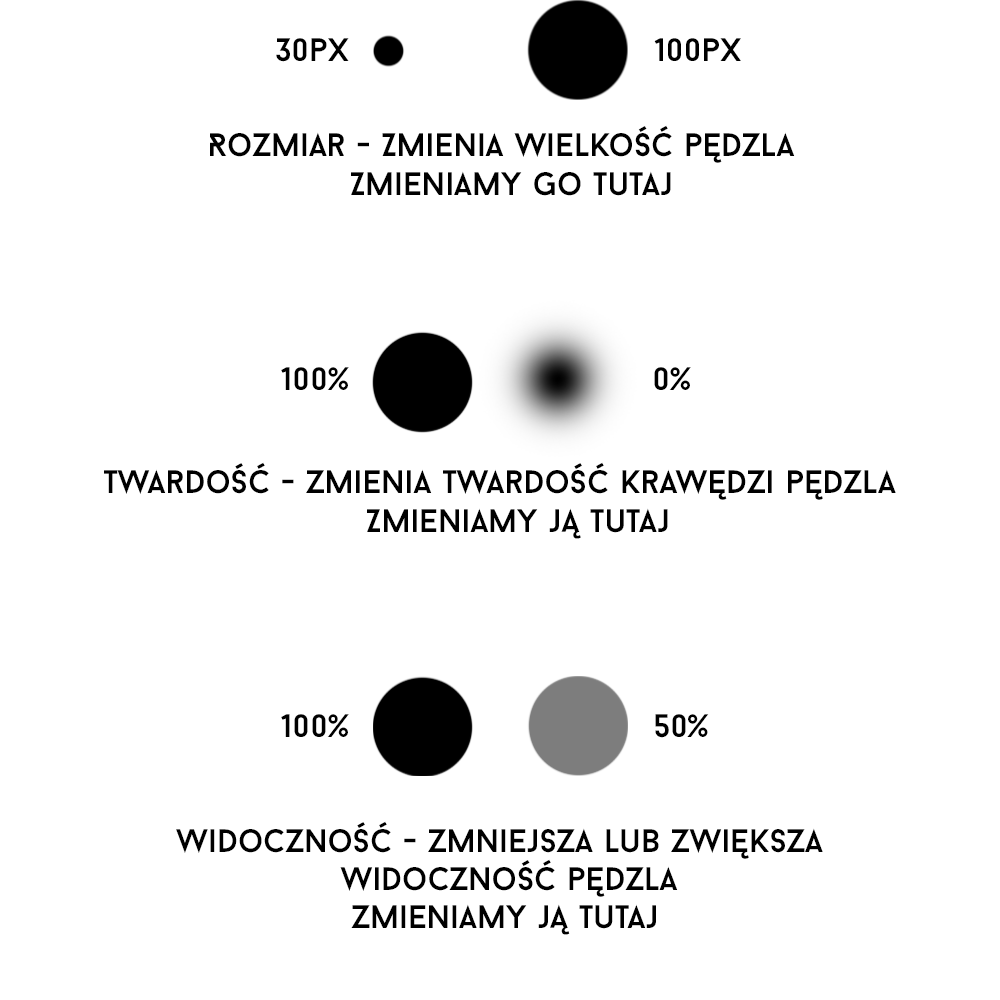
<style>
.page{position:relative;width:1000px;height:1000px;background:#ffffff}
.page>*{position:absolute;margin:0}
.t1{font:32.4px "BaronNeue";color:#000000}
</style>
<div class="page">
<p class="t1" style="left:276px;top:38px;width:73px;height:24px">30px</p>
<p class="t1" style="left:654px;top:38px;width:87px;height:23px">100px</p>
<p class="t1" style="left:210px;top:125px;width:585px;height:71px">Rozmiar - Zmienia wielkość pędzla<br>             Zmieniamy Go tutaj</p>
<p class="t1" style="left:281px;top:367px;width:68px;height:23px">100%</p>
<p class="t1" style="left:654px;top:367px;width:37px;height:23px">0%</p>
<p class="t1" style="left:104px;top:462px;width:792px;height:77px">Twardość - zmienia twardość krawędzi pędzla<br>                        Zmieniamy ją tutaj</p>
<p class="t1" style="left:281px;top:714px;width:68px;height:23px">100%</p>
<p class="t1" style="left:655px;top:714px;width:54px;height:24px">50%</p>
<p class="t1" style="left:176px;top:821px;width:647px;height:114px">Widoczność - zmniejsza lub zwiększa <br>               widoczność pędzla<br>                zmieniamy ją tutaj</p>
</div>
